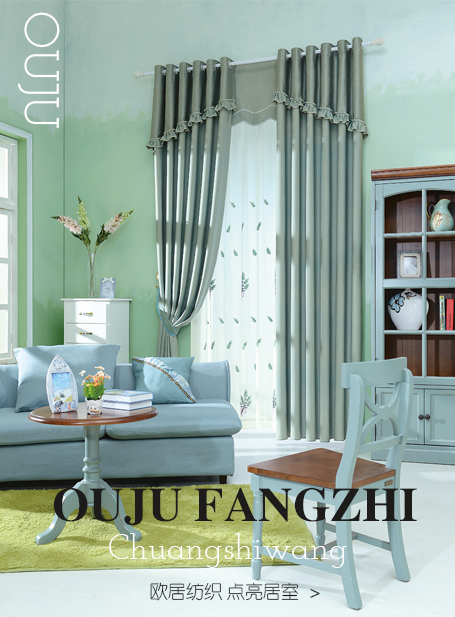
<style>
.page{position:relative;width:455px;height:617px}
.page>*{position:absolute;margin:0}
.t1{font:48.2px "JosefinSlab";color:#ffffff}
.t2{font:48px "FZXBSJW--GB1-0";color:#1d1c1b}
.t3{font:34.5px "JosefinSlab";color:#ffffff}
.t4{font:18px "FZY1JW--GB1-0";color:#1d1c1b}
</style>
<div class="page">
<p class="t1" style="left:17px;top:12px;width:43px;height:116px;rotate:90deg">OUJU</p>
<p class="t2" style="left:53px;top:487px;width:364px;height:39px">OUJU FANGZHI</p>
<p class="t3" style="left:109px;top:533px;width:238px;height:35px">Chuangshiwang</p>
<p class="t4" style="left:150px;top:582px;width:170px;height:19px">欧居纺织 点亮居室  &gt;</p>
</div>
